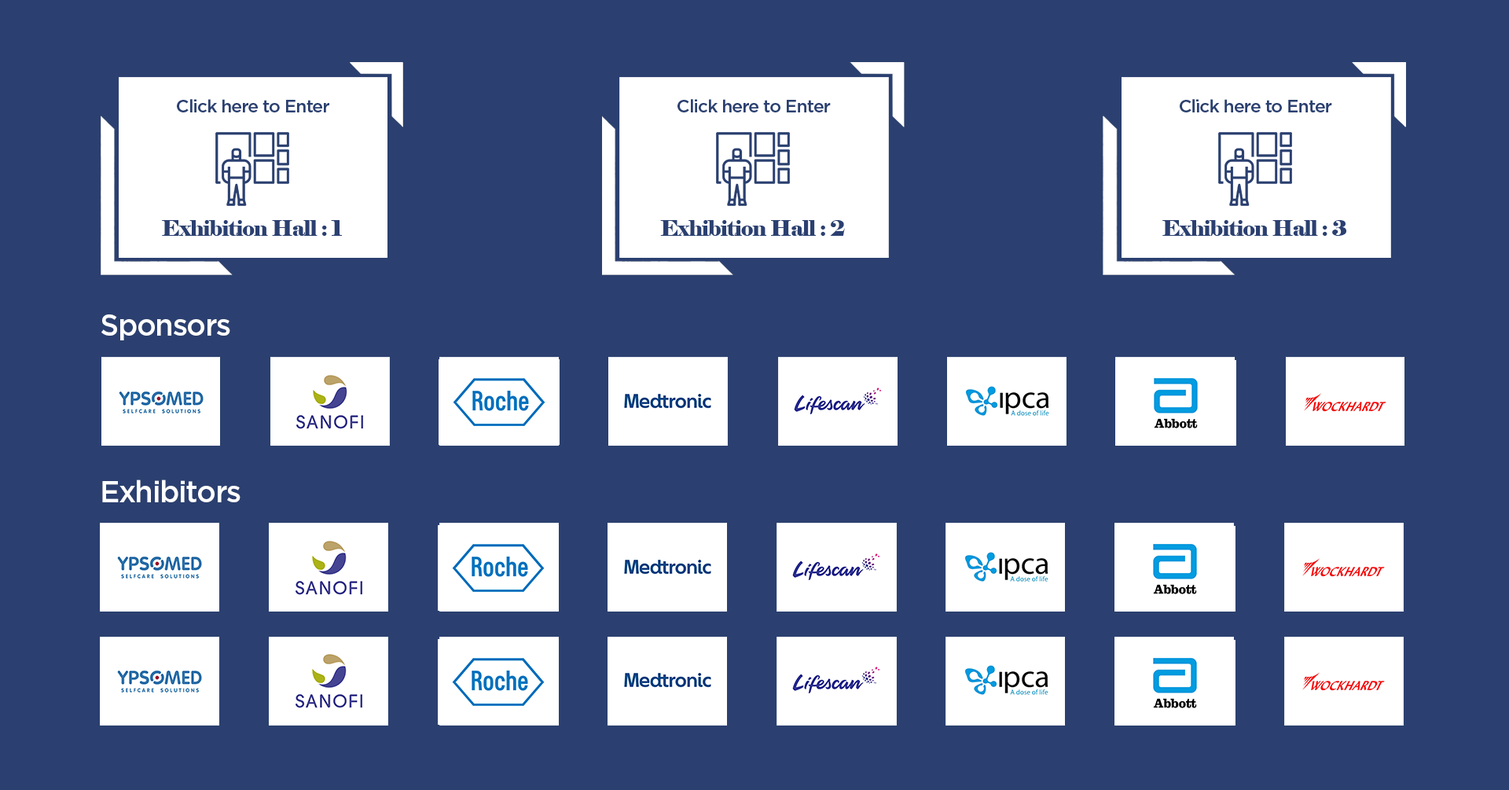
<style>
.page{position:relative;width:1509px;height:790px;background:#2b4070}
.page>*{position:absolute;margin:0}
.t1{font:17.9px "Gotham-Medium";letter-spacing:-0.04em;color:#2b4070}
.t2{font:21.5px "Elephant-Regular";letter-spacing:-0.04em;color:#2b4070}
.t3{font:30px "Gotham-Medium";letter-spacing:-0.04em;color:#ffffff}
</style>
<div class="page">
<p class="t1" style="left:177px;top:99px;width:152px;height:13px">Click here to Enter</p>
<p class="t1" style="left:678px;top:99px;width:153px;height:13px">Click here to Enter</p>
<p class="t1" style="left:1180px;top:99px;width:152px;height:13px">Click here to Enter</p>
<p class="t2" style="left:162px;top:220px;width:180px;height:16px">Exhibition Hall : 1</p>
<p class="t2" style="left:660px;top:220px;width:185px;height:16px">Exhibition Hall : 2</p>
<p class="t2" style="left:1163px;top:220px;width:184px;height:16px">Exhibition Hall : 3</p>
<p class="t3" style="left:101px;top:314px;width:129px;height:26px">Sponsors</p>
<p class="t3" style="left:102px;top:480px;width:139px;height:22px">Exhibitors</p>
</div>
